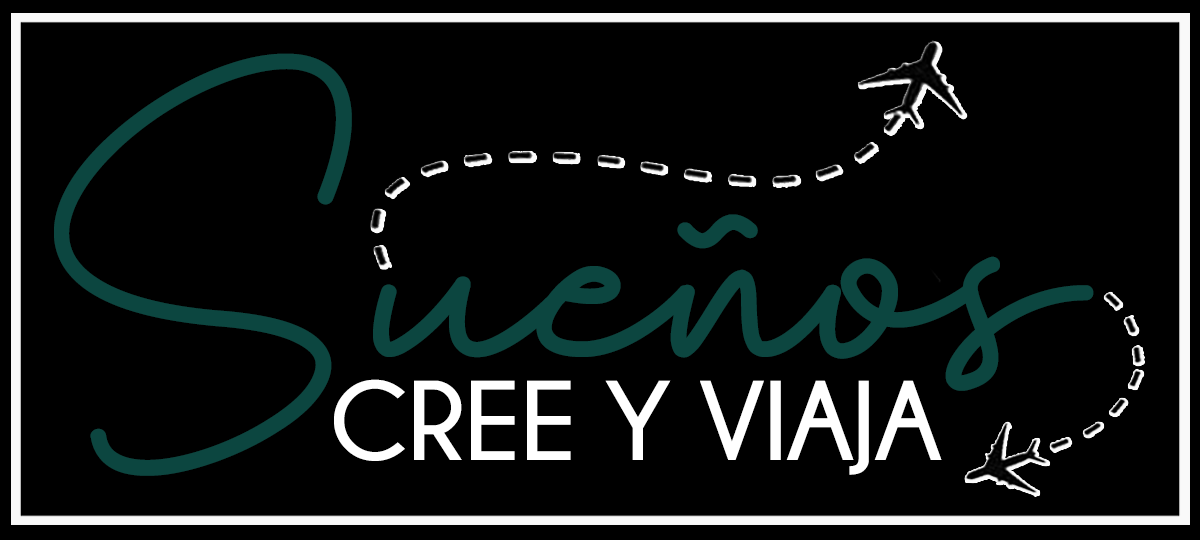
<style>
.page{position:relative;width:1200px;height:540px;background:#000000}
.page>*{position:absolute;margin:0}
.t1{font:112.7px "Champagne&Limousines-Bold";color:#ffffff}
</style>
<div class="page">
<p class="t1" style="left:334px;top:379px;width:608px;height:96px">CREE Y VIAJA</p>
</div>
